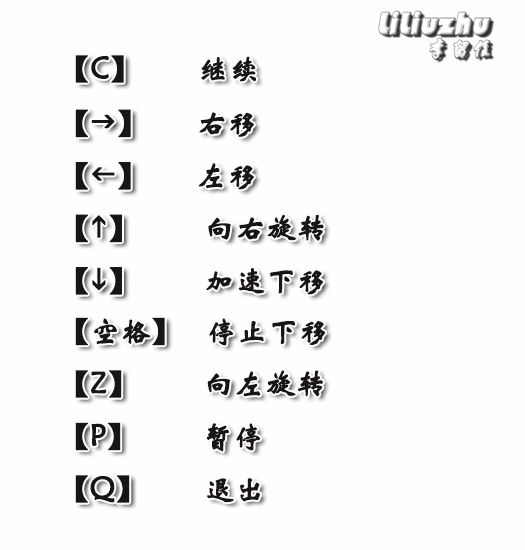
<style>
.page{position:relative;width:525px;height:550px;background:#fefefe}
.page>*{position:absolute;margin:0}
.t1{font:30px "STXinwei";color:#181515;font-weight:bold}
.t2{font:30px "Wingdings3";color:#181515;font-weight:bold}
</style>
<div class="page">
<p class="t1" style="left:75px;top:55px;width:251px;height:448px">【C】       继续<br>【<span class="t2">g</span>】      右移<br>【<span class="t2">f</span>】      左移<br>【<span class="t2">h</span>】        向右旋转<br>【<span class="t2">i</span>】        加速下移<br>【空格】   停止下移<br>【Z】        向左旋转<br>【P】        暂停<br>【Q】       退出</p>
</div>
